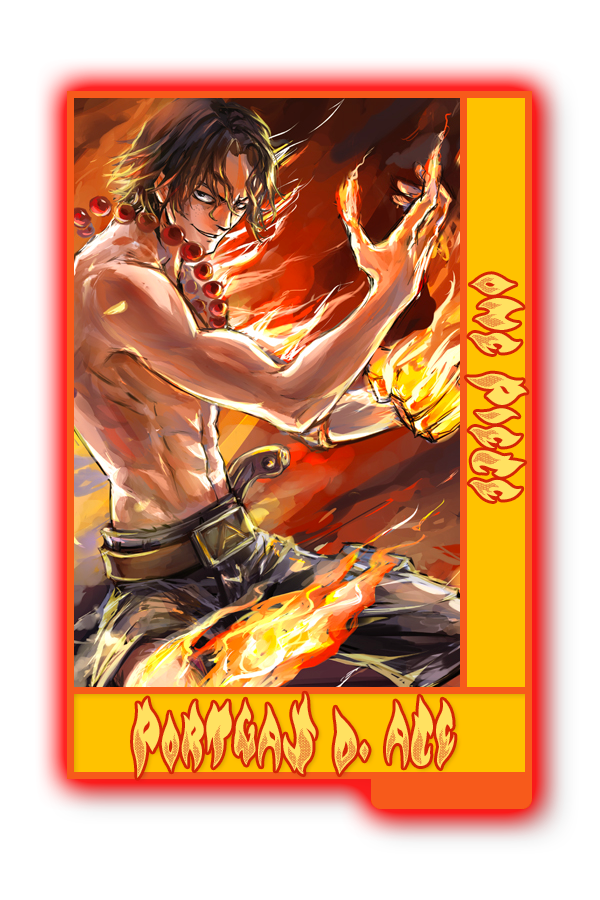
<style>
.page{position:relative;width:600px;height:900px;background:#ffffff}
.page>*{position:absolute;margin:0}
.t1{font:31.6px "Flameon!";color:#fde372;scale:1.38 1}
.t2{font:41.7px "Flameon!";color:#fde372;scale:0.9 1}
</style>
<div class="page">
<p class="t1" style="left:466px;top:274px;width:61px;height:227px;rotate:90deg">ONE PIECE</p>
<p class="t2" style="left:133px;top:693px;width:322px;height:85px;rotate:-1deg">PORTGAS D. ACE</p>
</div>
